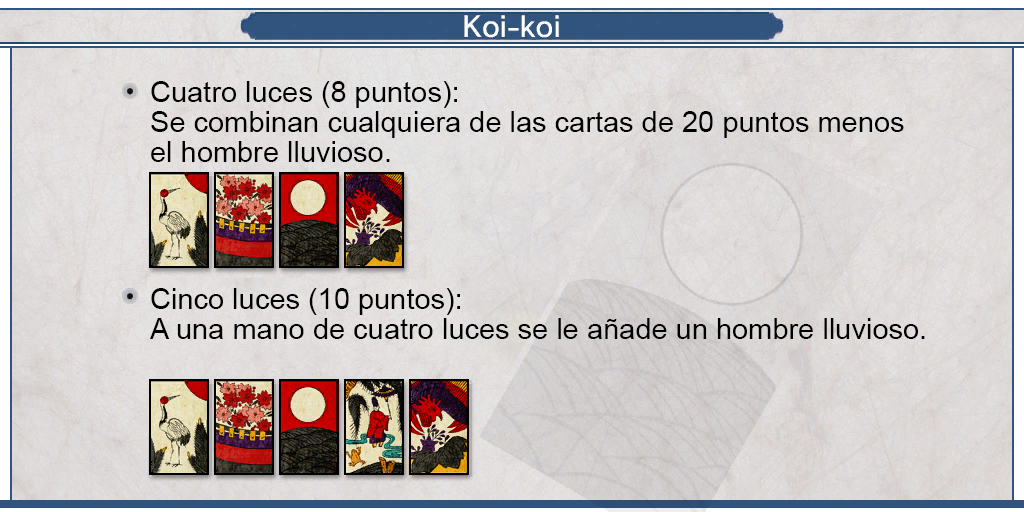
<style>
.page{position:relative;width:1024px;height:512px}
.page>*{position:absolute;margin:0}
.t1{font:29px/30px "ArialMT";color:#000000}
</style>
<div class="page">
<p class="t1" style="left:151px;top:81px;width:753px;height:81px;text-align:justify">Cuatro luces (8 puntos):<br>Se combinan cualquiera de las cartas de 20 puntos menos<br>el hombre lluvioso.</p>
<p class="t1" style="left:150px;top:288px;width:775px;height:51px;text-align:justify">Cinco luces (10 puntos):<br>A una mano de cuatro luces se le añade un hombre lluvioso.</p>
</div>
